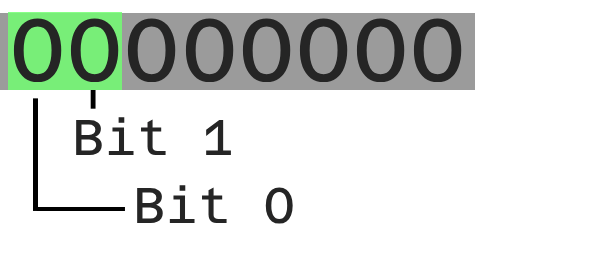
<style>
.page{position:relative;width:600px;height:255px;background:#ffffff}
.page>*{position:absolute;margin:0}
.t1{font:88px "AzeretMonoRoman-Regular";color:#252525}
.t2{font:50px "AzeretMonoRoman-Regular";color:#252525}
</style>
<div class="page">
<p class="t1" style="left:13px;top:18px;width:449px;height:65px">00000000</p>
<p class="t2" style="left:76px;top:117px;width:155px;height:38px">Bit 1</p>
<p class="t2" style="left:137px;top:185px;width:156px;height:39px">Bit 0</p>
</div>
